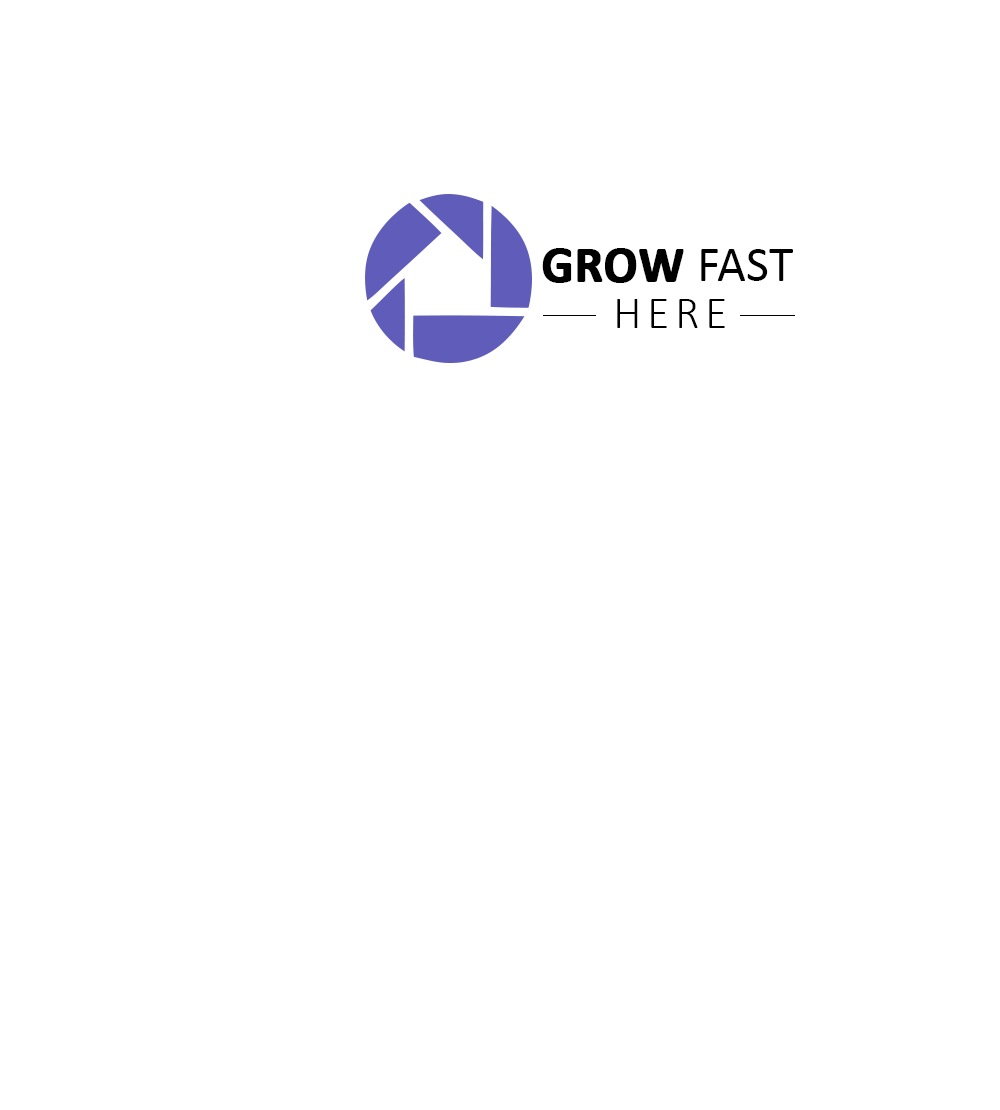
<style>
.page{position:relative;width:1000px;height:1110px;background:#ffffff}
.page>*{position:absolute;margin:0}
.t1{font:50px "Calibri-Bold";color:#000000;text-transform:uppercase;font-weight:bold}
.t2{font:50px "Calibri";color:#000000;text-transform:uppercase}
.t3{font:45.8px "Calibri-Light";letter-spacing:0.12em;color:#000000;text-transform:uppercase}
</style>
<div class="page">
<p class="t1" style="left:542px;top:248px;width:251px;height:35px">GROW <span class="t2">FAST</span></p>
<p class="t3" style="left:617px;top:299px;width:108px;height:29px">here</p>
</div>
